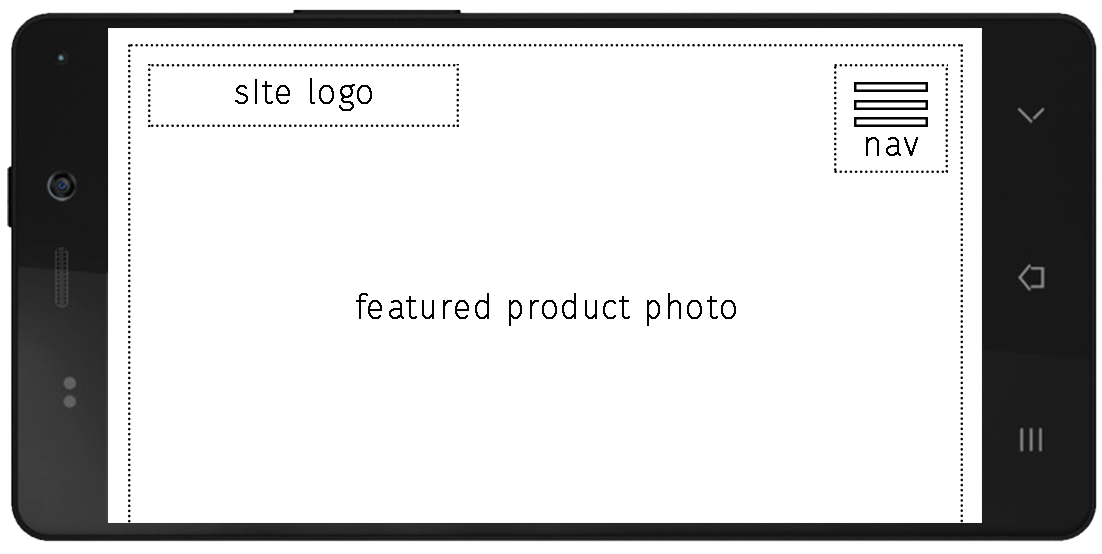
<style>
.page{position:relative;width:1102px;height:554px;background:#ffffff}
.page>*{position:absolute;margin:0}
.t1{font:33px "FiraSans-Hair";color:#000000;font-weight:bold}
</style>
<div class="page">
<p class="t1" style="left:235px;top:78px;width:137px;height:33px">site logo</p>
<p class="t1" style="left:866px;top:137px;width:52px;height:19px">nav</p>
<p class="t1" style="left:356px;top:293px;width:380px;height:33px">featured product photo</p>
</div>
